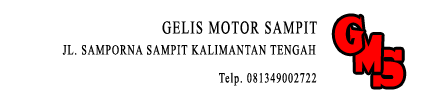
<style>
.page{position:relative;width:427px;height:100px;background:#ffffff}
.page>*{position:absolute;margin:0}
.t1{font:48.6px "SnapITC-Regular";letter-spacing:0.1em;color:#ff0000;scale:0.7 1}
.t2{font:18px "TimesNewRomanPSMT";letter-spacing:0.1em;color:#000000;scale:0.7 1}
.t3{font:48.6px "ShowcardGothic-Reg";letter-spacing:0.1em;color:#ff0000;scale:0.7 1}
.t4{font:14px "TimesNewRomanPSMT";letter-spacing:0.1em;color:#000000;scale:0.7 1}
.t5{font:48.6px "BlackoakStd";letter-spacing:0.1em;color:#ff0000;scale:0.41 1}
</style>
<div class="page">
<p class="t1" style="left:334px;top:16px;width:30px;height:38px">G</p>
<p class="t2" style="left:162px;top:21px;width:155px;height:13px">GELIS MOTOR SAMPIT</p>
<p class="t3" style="left:354px;top:35px;width:28px;height:38px">M</p>
<p class="t4" style="left:62px;top:45px;width:254px;height:10px">JL. SAMPORNA SAMPIT KALIMANTAN TENGAH</p>
<p class="t5" style="left:373px;top:49px;width:31px;height:38px">S</p>
<p class="t4" style="left:219px;top:72px;width:98px;height:14px">Telp. 081349002722</p>
</div>
